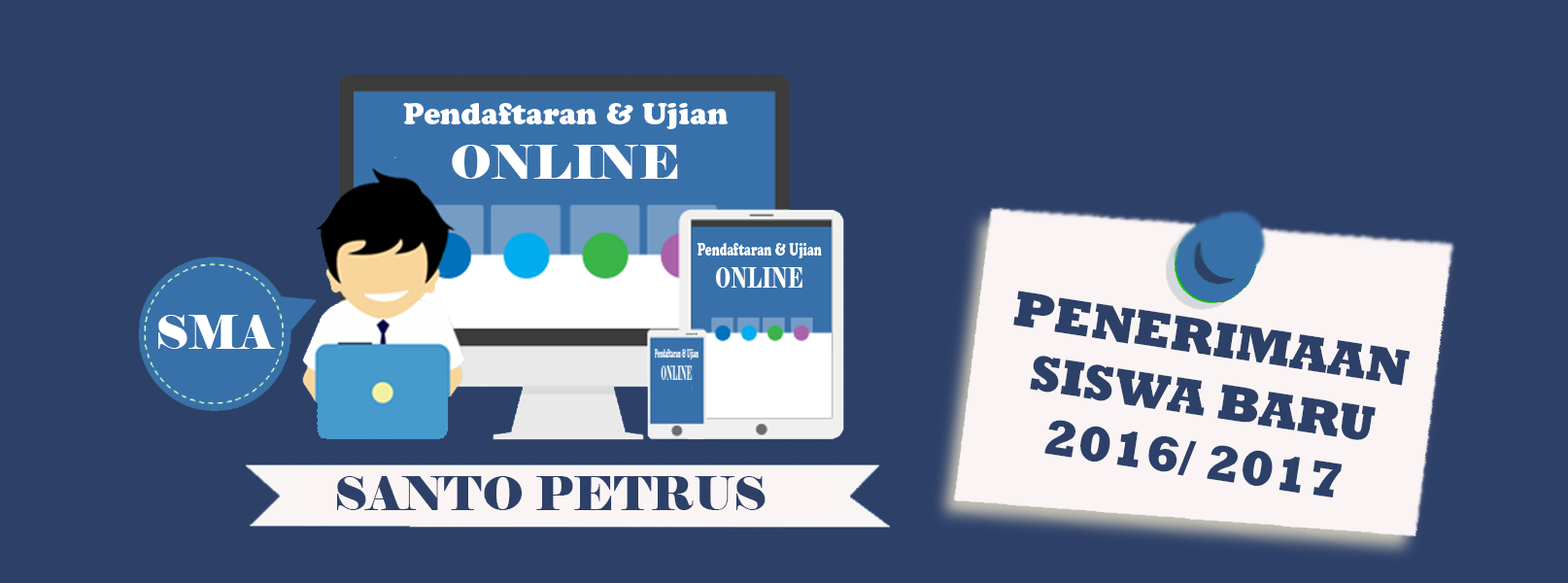
<style>
.page{position:relative;width:1568px;height:583px;background:#2d4068}
.page>*{position:absolute;margin:0}
.t1{font:29.3px "CooperBlackStd";color:#ffffff}
.t2{font:46.9px "Elephant-Regular";color:#ffffff}
.t3{font:50.9px "Rockwell-ExtraBold";color:#2d4068}
.t4{font:46.6px "Elephant-Regular";color:#ffffff}
.t5{font:46.6px "Elephant-Regular";color:#2d4068}
</style>
<div class="page">
<p class="t1" style="left:403px;top:103px;width:325px;height:26px">Pendaftaran &amp; Ujian</p>
<p class="t2" style="left:452px;top:145px;width:226px;height:34px">ONLINE</p>
<p class="t3" style="left:1013px;top:290px;width:398px;height:207px;text-align:center;rotate:9deg">PENERIMAAN SISWA BARU <br>2016/ 2017</p>
<p class="t4" style="left:158px;top:315px;width:117px;height:34px">SMA</p>
<p class="t5" style="left:337px;top:476px;width:429px;height:34px">SANTO PETRUS</p>
</div>
